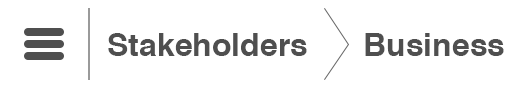
<style>
.page{position:relative;width:530px;height:88px;background:#ffffff}
.page>*{position:absolute;margin:0}
.t1{font:32px "Helvetica-Bold";color:#4f4f4f}
</style>
<div class="page">
<p class="t1" style="left:108px;top:33px;width:199px;height:23px">Stakeholders</p>
<p class="t1" style="left:365px;top:33px;width:139px;height:23px">Business</p>
</div>
